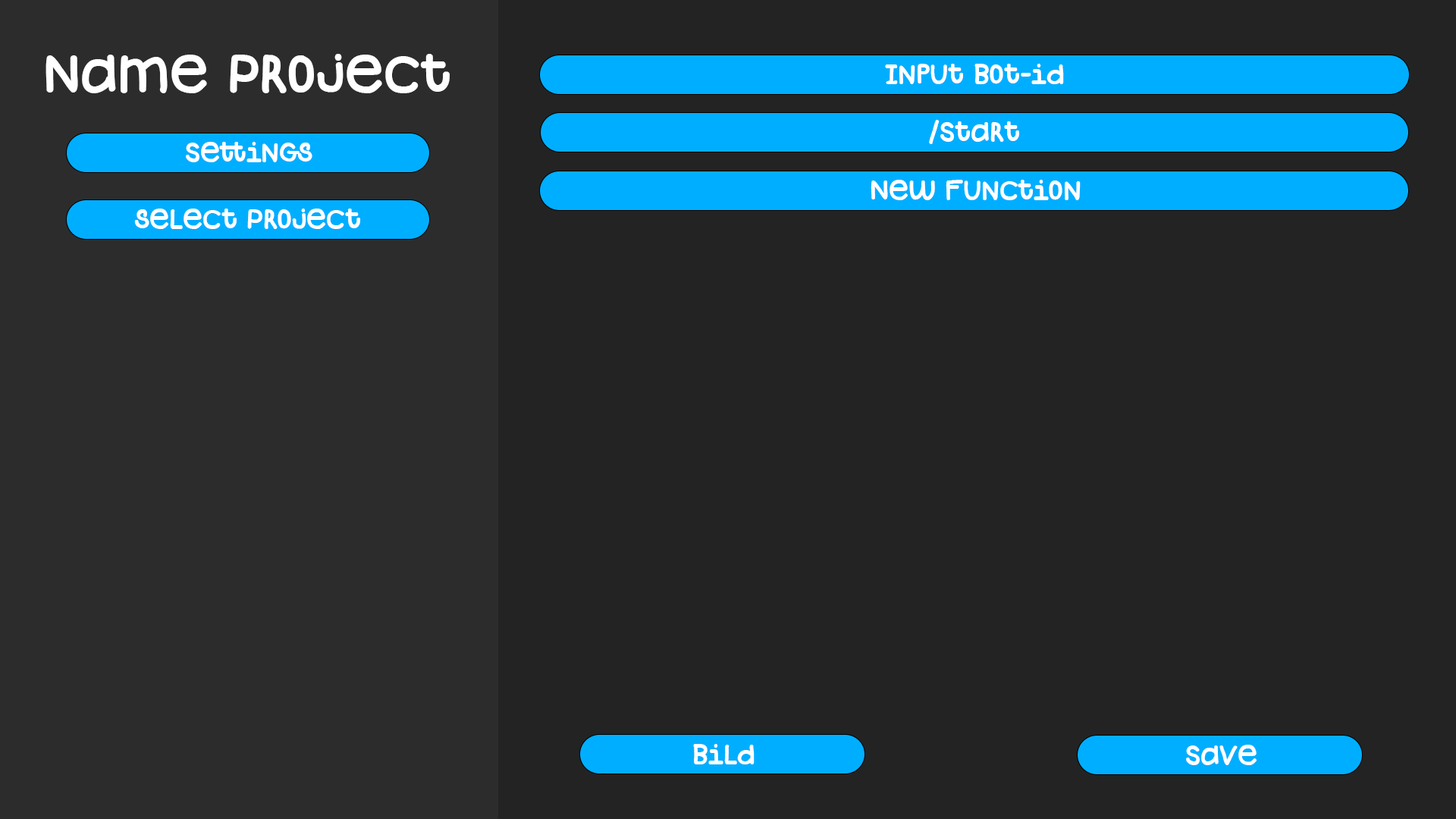
<style>
.page{position:relative;width:1456px;height:819px;background:#232323}
.page>*{position:absolute;margin:0}
.t1{font:54.6px "MVcrookerRegular";color:#ffffff}
.t2{font:27.8px "MVcrookerRegular";color:#ffffff}
</style>
<div class="page">
<p class="t1" style="left:45px;top:54px;width:405px;height:39px">Name Project</p>
<p class="t2" style="left:885px;top:64px;width:179px;height:20px">Input Bot-id</p>
<p class="t2" style="left:929px;top:120px;width:90px;height:24px">/Start</p>
<p class="t2" style="left:186px;top:142px;width:126px;height:20px">Settings</p>
<p class="t2" style="left:871px;top:180px;width:210px;height:20px">New Function</p>
<p class="t2" style="left:134px;top:209px;width:226px;height:20px">select Project</p>
<p class="t2" style="left:693px;top:744px;width:62px;height:20px">Bild</p>
<p class="t2" style="left:1186px;top:745px;width:71px;height:20px">Save</p>
</div>
